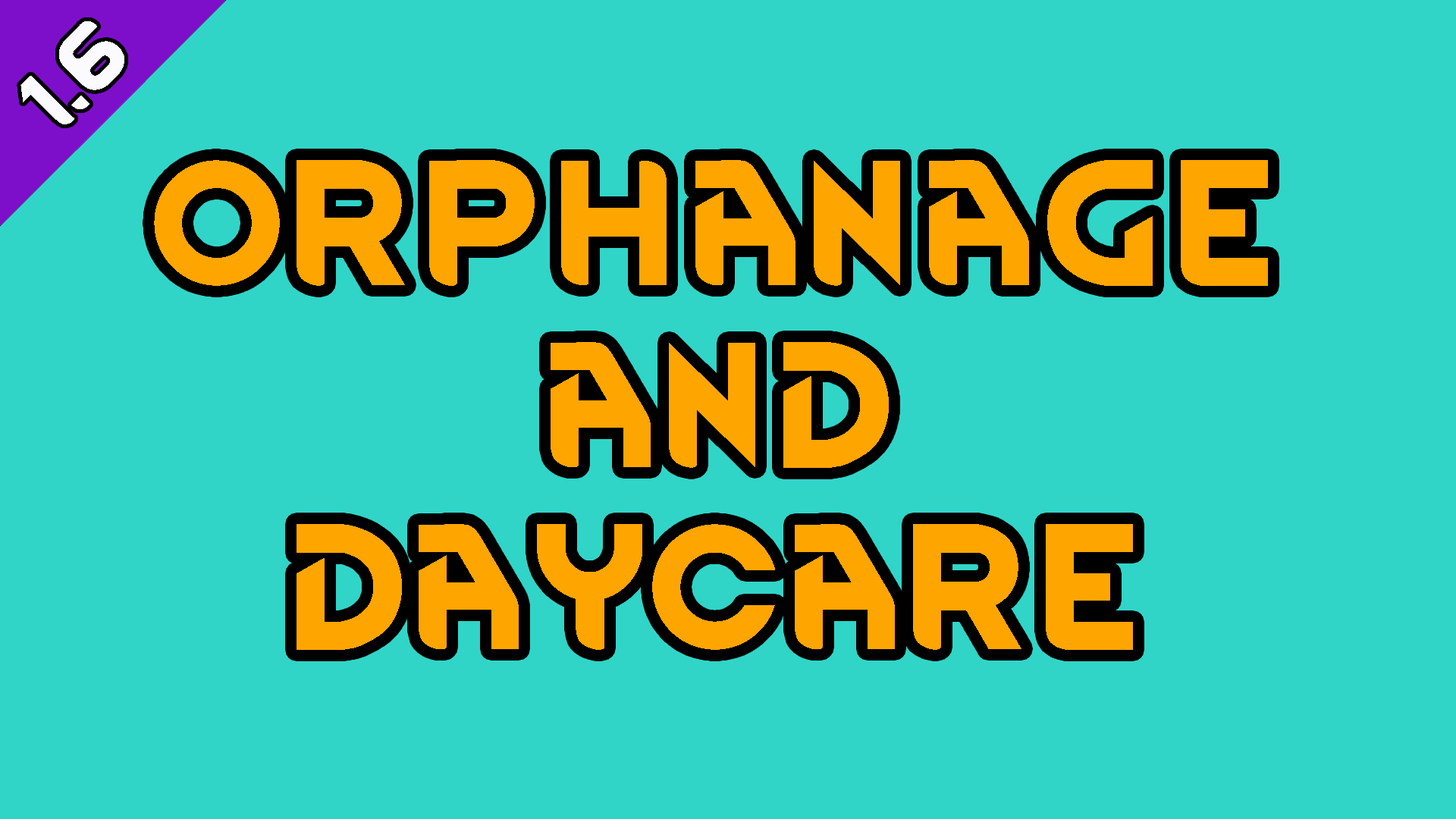
<style>
.page{position:relative;width:1456px;height:819px;background:#30d5c8}
.page>*{position:absolute;margin:0}
.t1{font:75.8px "RimWordFont";color:#fafaff}
.t2{font:151.7px "RimWordFont";color:#ffa500}
</style>
<div class="page">
<p class="t1" style="left:20px;top:21px;width:104px;height:103px;rotate:-46deg">1.6</p>
<p class="t2" style="left:154px;top:160px;width:1114px;height:490px;text-align:center">orphanageand<br>daycare</p>
</div>
